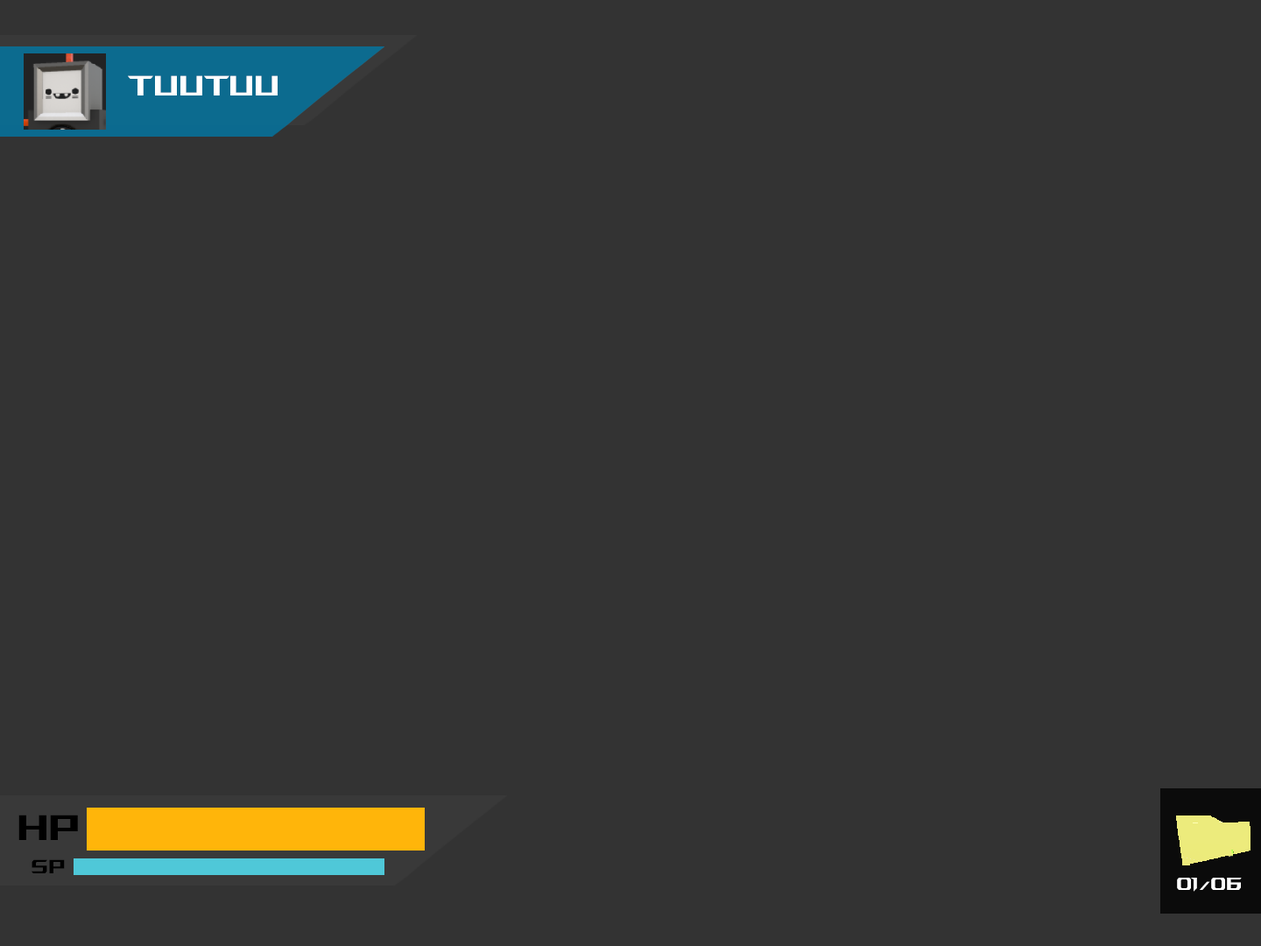
<style>
.page{position:relative;width:1261px;height:946px;background:#333333}
.page>*{position:absolute;margin:0}
.t1{font:44.6px "ROGFontsv1.6-Regular";color:#ffffff}
.t2{font:56.7px "ROGFontsv1.6-Regular";color:#000000}
.t3{font:30.8px "ROGFontsv1.6-Regular";color:#000000}
.t4{font:28.1px "ROGFontsv1.6-Regular";color:#ffffff}
</style>
<div class="page">
<p class="t1" style="left:128px;top:75px;width:150px;height:20px">TuuTuu</p>
<p class="t2" style="left:18px;top:814px;width:60px;height:26px">hP</p>
<p class="t3" style="left:32px;top:859px;width:33px;height:14px">SP</p>
<p class="t4" style="left:1177px;top:877px;width:65px;height:14px">01/06</p>
</div>
